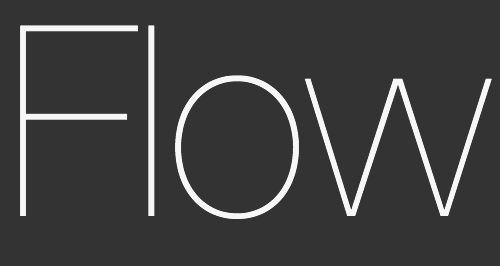
<style>
.page{position:relative;width:500px;height:266px;background:#333333}
.page>*{position:absolute;margin:0}
.t1{font:266.1px "HelveticaNeue-UltraLight";color:#f7f7f7}
</style>
<div class="page">
<p class="t1" style="left:20px;top:25px;width:472px;height:194px">Flow</p>
</div>
